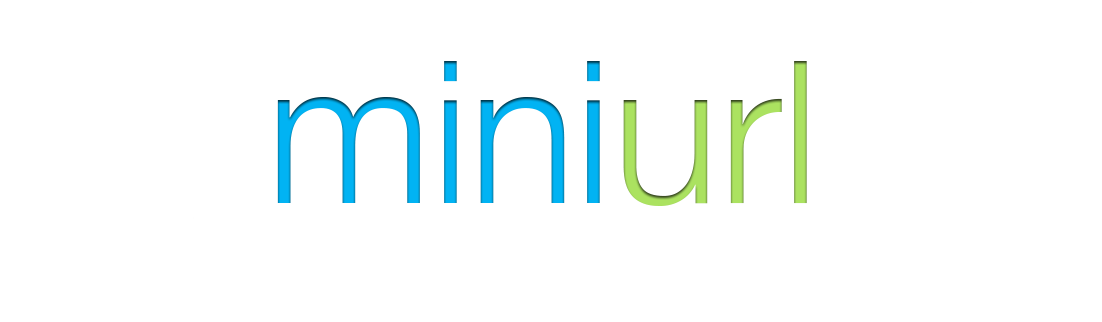
<style>
.page{position:relative;width:1102px;height:322px;background:#ffffff}
.page>*{position:absolute;margin:0}
.t1{font:199px "HelveticaNeue-Light";color:#01b3f3}
.t2{font:199px "HelveticaNeue-Light";color:#abe260}
</style>
<div class="page">
<p class="t1" style="left:277px;top:61px;width:530px;height:145px">mini<span class="t2">url</span></p>
</div>
